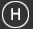
<style>
.page{position:relative;width:33px;height:29px;background:#333333}
.page>*{position:absolute;margin:0}
.t1{font:16.1px "Verdana";letter-spacing:0.04em;color:#ffffff;scale:0.93 1}
</style>
<div class="page">
<p class="t1" style="left:11px;top:8px;width:9px;height:12px">H</p>
</div>
